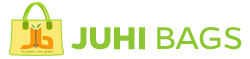
<style>
.page{position:relative;width:250px;height:59px;background:#ffffff}
.page>*{position:absolute;margin:0}
.t1{font:35.4px "Gentona-Bold";color:#8cc732;scale:1.04 1}
.t2{font:35.4px "Gentona-Book";color:#8cc732;scale:1.04 1}
</style>
<div class="page">
<p class="t1" style="left:71px;top:27px;width:171px;height:23px">JUHI <span class="t2">BAGS</span></p>
</div>
